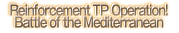
<style>
.page{position:relative;width:179px;height:33px;background:#ffffff}
.page>*{position:absolute;margin:0}
.t1{font:14px/12px "GothicMB101Pro-DeBold";letter-spacing:-0.08em;color:#7f6951;scale:0.8 1}
</style>
<div class="page">
<p class="t1" style="left:10px;top:4px;width:158px;height:24px;text-align:center">Reinforcement TP Operation!<br>Battle of the Mediterranean</p>
</div>
